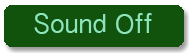
<style>
.page{position:relative;width:189px;height:53px;background:#11530c}
.page>*{position:absolute;margin:0}
.t1{font:24px "BanglaSangamMN";color:#8ce6ba}
</style>
<div class="page">
<p class="t1" style="left:34px;top:13px;width:118px;height:21px">Sound Off</p>
</div>
